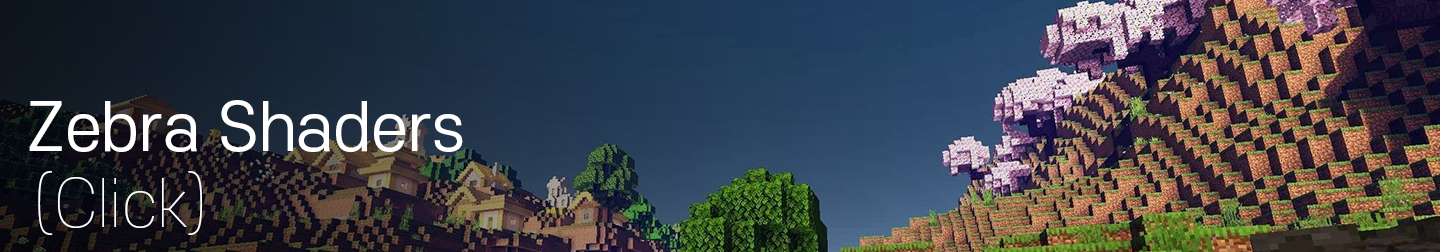
<style>
.page{position:relative;width:1440px;height:252px}
.page>*{position:absolute;margin:0}
.t1{font:64px "S-CoreDream-4Regular";color:#ffffff}
.t2{font:64px "S-CoreDream-1Thin";color:#ffffff}
</style>
<div class="page">
<p class="t1" style="left:29px;top:100px;width:434px;height:52px">Zebra Shaders</p>
<p class="t2" style="left:38px;top:171px;width:164px;height:64px">(Click)</p>
</div>
